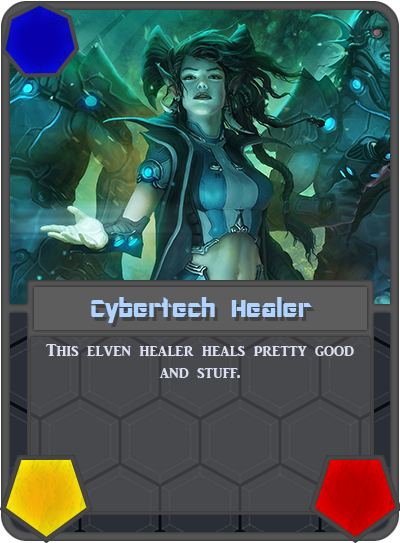
<style>
.page{position:relative;width:400px;height:543px}
.page>*{position:absolute;margin:0}
.t1{font:27px "ARDESTINE";color:#aed4ff}
.t2{font:18px "ARJULIAN";color:#dbdff1}
</style>
<div class="page">
<p class="t1" style="left:91px;top:297px;width:221px;height:26px">Cybertech Healer</p>
<p class="t2" style="left:46px;top:344px;width:308px;height:34px;text-align:center">This elven healer heals pretty good and stuff.</p>
</div>
